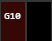
<style>
.page{position:relative;width:52px;height:41px;background:#000000}
.page>*{position:absolute;margin:0}
.t1{font:10px "Consolas";color:#f5f5f5}
</style>
<div class="page">
<p class="t1" style="left:4px;top:13px;width:17px;height:6px">G10</p>
</div>
